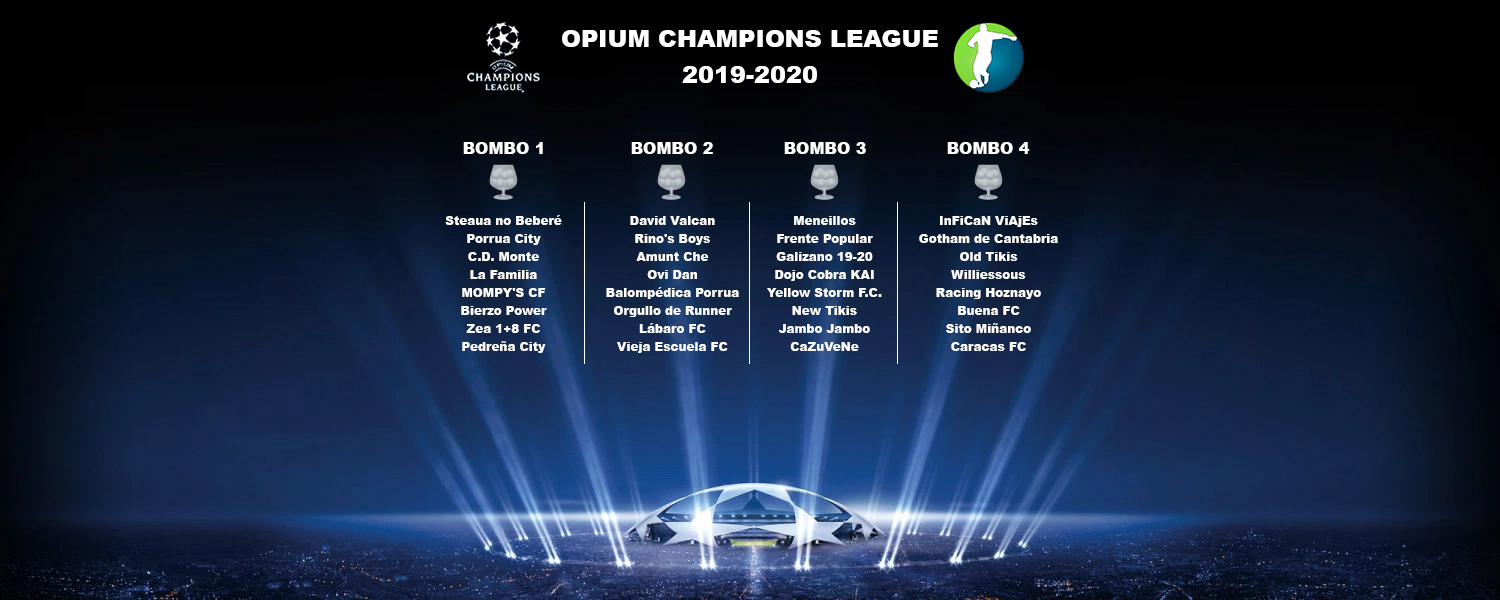
<style>
.page{position:relative;width:1500px;height:600px}
.page>*{position:absolute;margin:0}
.t1{font:24px/36px "Arial-Black";color:#ffffff}
.t2{font:16px "Arial-Black";color:#ffffff}
.t3{font:12px/18px "Arial-Black";color:#ffffff}
</style>
<div class="page">
<p class="t1" style="left:562px;top:30px;width:376px;height:53px;text-align:center">OPIUM CHAMPIONS LEAGUE<br>2019-2020</p>
<p class="t2" style="left:463px;top:142px;width:80px;height:12px">BOMBO 1</p>
<p class="t2" style="left:631px;top:142px;width:82px;height:12px">BOMBO 2</p>
<p class="t2" style="left:784px;top:142px;width:82px;height:12px">BOMBO 3</p>
<p class="t2" style="left:947px;top:142px;width:83px;height:12px">BOMBO 4</p>
<p class="t3" style="left:445px;top:215px;width:117px;height:138px;text-align:center">Steaua no Beberé<br>Porrua City<br>C.D. Monte<br>La Familia<br>MOMPY'S CF<br>Bierzo Power<br>Zea 1+8 FC<br>Pedreña City</p>
<p class="t3" style="left:606px;top:216px;width:133px;height:137px;text-align:center">David Valcan<br>Rino's Boys<br>Amunt Che<br>Ovi Dan<br>Balompédica Porrua<br>Orgullo de Runner<br>Lábaro FC<br>Vieja Escuela FC</p>
<p class="t3" style="left:767px;top:216px;width:115px;height:135px;text-align:center">Meneillos<br>Frente Popular<br>Galizano 19-20<br>Dojo Cobra KAI<br>Yellow Storm F.C.<br>New Tikis<br>Jambo Jambo<br>CaZuVeNe</p>
<p class="t3" style="left:919px;top:216px;width:139px;height:135px;text-align:center">InFiCaN ViAjEs<br>Gotham de Cantabria<br>Old Tikis<br>Williessous<br>Racing Hoznayo<br>Buena FC<br>Sito Miñanco<br>Caracas FC</p>
</div>
